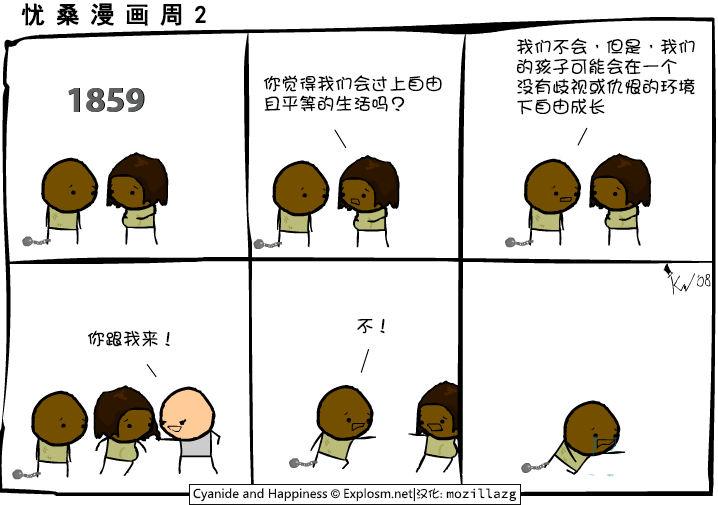
<style>
.page{position:relative;width:718px;height:505px;background:#ffffff}
.page>*{position:absolute;margin:0}
.t1{font:24px "SimHei";letter-spacing:0.42em;color:#000000;font-weight:bold}
.t2{font:18px/20px "DFGirl";color:#000000}
.t3{font:18px "DFGirl";color:#000000}
</style>
<div class="page">
<p class="t1" style="left:21px;top:3px;width:185px;height:23px">忧桑漫画周2</p>
<p class="t2" style="left:516px;top:38px;width:179px;height:77px">我们不会，但是，我们<br>的孩子可能会在一个<br>没有歧视或仇恨的环境<br>下自由成长</p>
<p class="t2" style="left:263px;top:75px;width:179px;height:37px">你觉得我们会过上自由<br>且平等的生活吗？</p>
<p class="t3" style="left:357px;top:318px;width:28px;height:16px">不！</p>
<p class="t3" style="left:87px;top:330px;width:83px;height:17px">你跟我来！</p>
</div>
